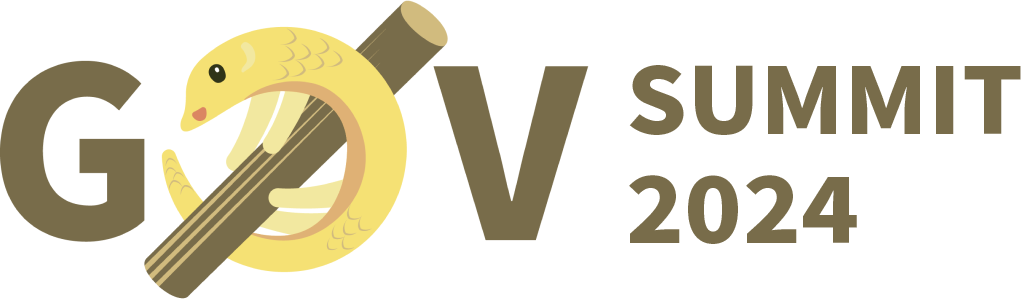
<style>
.page{position:relative;width:1021px;height:299px;background:#ffffff}
.page>*{position:absolute;margin:0}
.t1{font:91.2px "NotoSansTC-Black";color:#786c4a;scale:1.05 1}
</style>
<div class="page">
<p class="t1" style="left:629px;top:65px;width:392px;height:179px">SUMMIT<br>2024</p>
</div>
